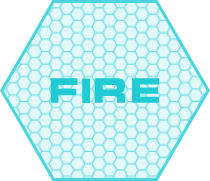
<style>
.page{position:relative;width:210px;height:181px;background:#e2f8f9}
.page>*{position:absolute;margin:0}
.t1{font:33.9px "MicrogrammaBold";color:#20cbd4}
</style>
<div class="page">
<p class="t1" style="left:50px;top:78px;width:109px;height:25px">FIRE</p>
</div>
